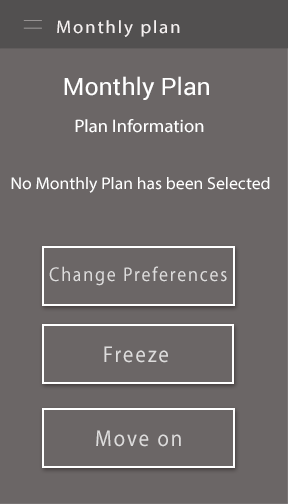
<style>
.page{position:relative;width:288px;height:504px;background:#6b6666}
.page>*{position:absolute;margin:0}
.t1{font:18px "MyriadPro-Regular";letter-spacing:0.1em;color:#f6f1f1;scale:1.04 1}
.t2{font:24px "Roboto-Regular";color:#ffffff;scale:1.04 1}
.t3{font:18px "MyriadPro-Regular";color:#ffffff;scale:1.04 1}
.t4{font:17px "MyriadPro-Regular";color:#ffffff;scale:1.04 1}
.t5{font:20px "MyriadPro-Regular";letter-spacing:0.1em;color:#dddcdc;scale:0.89 1}
.t6{font:23px "MyriadPro-Regular";letter-spacing:0.1em;color:#dddcdc;scale:0.89 1}
</style>
<div class="page">
<p class="t1" style="left:57px;top:20px;width:123px;height:17px">Monthly plan</p>
<p class="t2" style="left:64px;top:76px;width:145px;height:24px">Monthly Plan</p>
<p class="t3" style="left:75px;top:119px;width:129px;height:14px">Plan Information</p>
<p class="t4" style="left:11px;top:177px;width:259px;height:16px">No Monthly Plan has been Selected</p>
<p class="t5" style="left:49px;top:266px;width:178px;height:20px">Change Preferences</p>
<p class="t6" style="left:104px;top:346px;width:64px;height:17px">Freeze</p>
<p class="t6" style="left:96px;top:430px;width:85px;height:17px">Move on</p>
</div>
